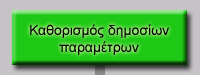
<style>
.page{position:relative;width:200px;height:75px;background:#c6c3c6}
.page>*{position:absolute;margin:0}
.t1{font:14px "ArialMT";color:#000000}
</style>
<div class="page">
<p class="t1" style="left:30px;top:24px;width:139px;height:31px;text-align:center">Καθορισμός δημοσίων<br>παραμέτρων</p>
</div>
